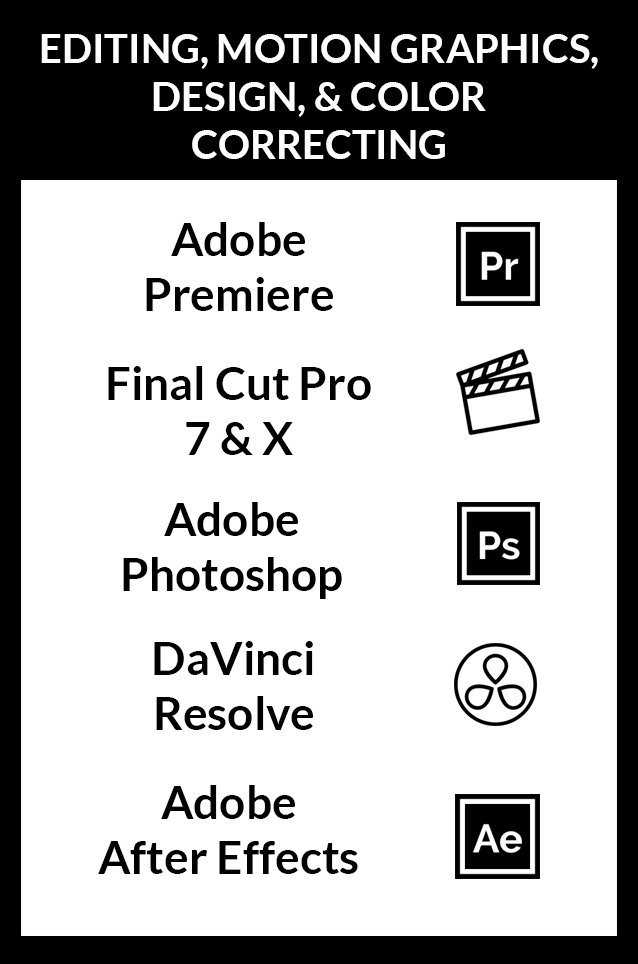
<style>
.page{position:relative;width:638px;height:964px;background:#ffffff}
.page>*{position:absolute;margin:0}
.t1{font:40px "Lato-Bold";color:#ffffff}
.t2{font:46px "Lato-Bold";color:#000000}
</style>
<div class="page">
<p class="t1" style="left:41px;top:34px;width:557px;height:125px;text-align:center">EDITING, MOTION GRAPHICS, DESIGN, &amp; COLOR CORRECTING</p>
<p class="t2" style="left:146px;top:222px;width:187px;height:89px;text-align:center">Adobe<br>Premiere</p>
<p class="t2" style="left:108px;top:366px;width:263px;height:89px;text-align:center">Final Cut Pro<br>7 &amp; X</p>
<p class="t2" style="left:123px;top:502px;width:219px;height:97px;text-align:center">Adobe<br>Photoshop</p>
<p class="t2" style="left:154px;top:641px;width:159px;height:89px;text-align:center">DaVinci<br>Resolve</p>
<p class="t2" style="left:98px;top:785px;width:260px;height:89px;text-align:center">Adobe<br>After Effects</p>
</div>
